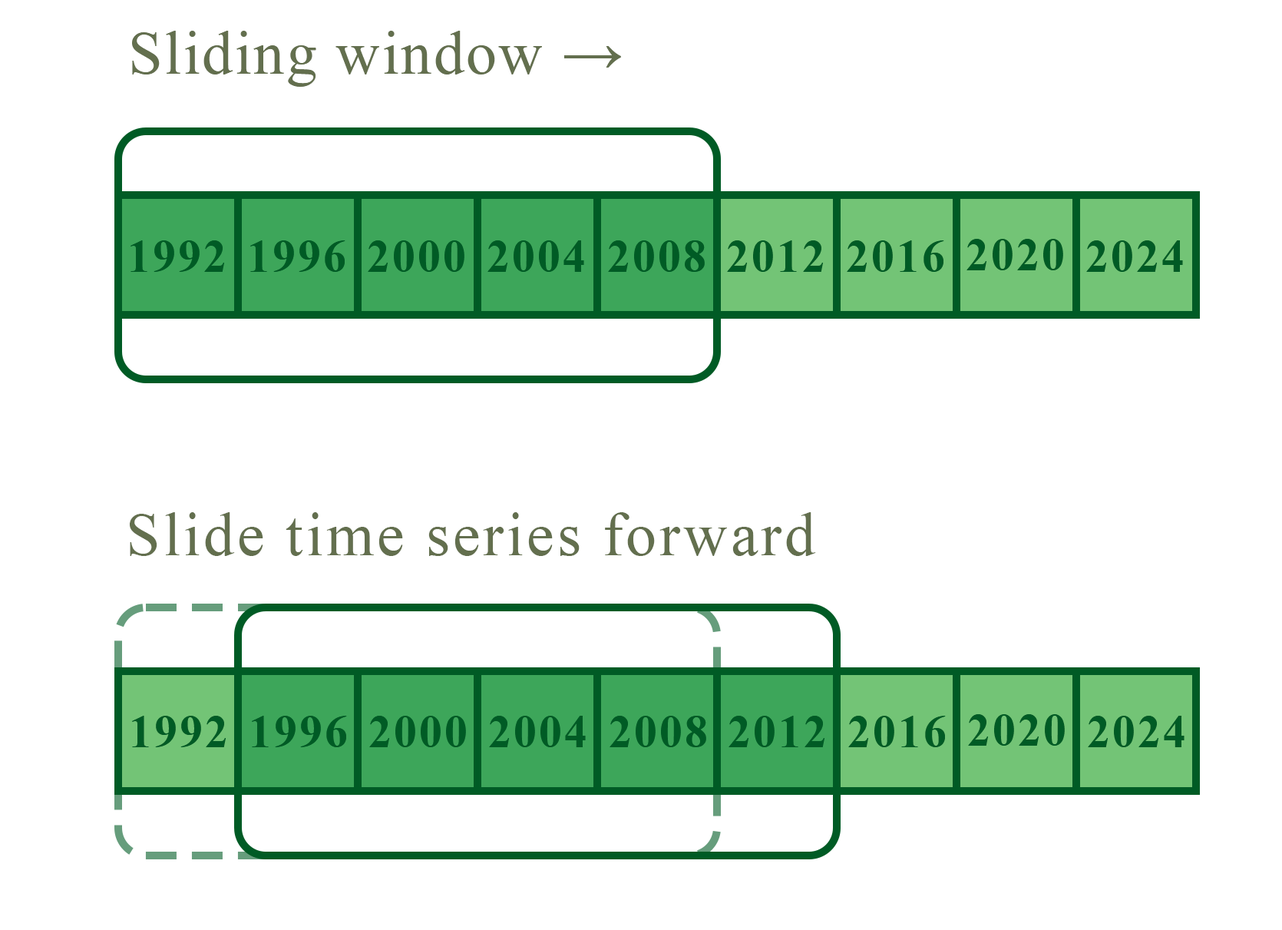
<style>
.page{position:relative;width:1282px;height:930px;background:#ffffff}
.page>*{position:absolute;margin:0}
.t1{font:61.4px "TimesNewRomanPSMT";letter-spacing:0.03em;color:#636f4e}
.t2{font:46.1px "TimesNewRomanPS-BoldMT";letter-spacing:0.05em;color:#005b25}
.t3{font:61.4px "TimesNewRomanPSMT";letter-spacing:0.05em;color:#636f4e}
</style>
<div class="page">
<p class="t1" style="left:132px;top:31px;width:489px;height:56px">Sliding window →</p>
<p class="t2" style="left:131px;top:240px;width:93px;height:32px">1992</p>
<p class="t2" style="left:131px;top:240px;width:93px;height:32px">1992</p>
<p class="t2" style="left:250px;top:240px;width:96px;height:32px">1996</p>
<p class="t2" style="left:250px;top:240px;width:96px;height:32px">1996</p>
<p class="t2" style="left:368px;top:240px;width:97px;height:32px">2000</p>
<p class="t2" style="left:368px;top:240px;width:97px;height:32px">2000</p>
<p class="t2" style="left:488px;top:240px;width:96px;height:32px">2004</p>
<p class="t2" style="left:488px;top:240px;width:96px;height:32px">2004</p>
<p class="t2" style="left:608px;top:240px;width:97px;height:32px">2008</p>
<p class="t2" style="left:608px;top:240px;width:97px;height:32px">2008</p>
<p class="t2" style="left:727px;top:240px;width:96px;height:32px">2012</p>
<p class="t2" style="left:727px;top:240px;width:96px;height:32px">2012</p>
<p class="t2" style="left:847px;top:240px;width:97px;height:32px">2016</p>
<p class="t2" style="left:847px;top:240px;width:97px;height:32px">2016</p>
<p class="t2" style="left:967px;top:239px;width:96px;height:31px">2020</p>
<p class="t2" style="left:967px;top:239px;width:96px;height:31px">2020</p>
<p class="t2" style="left:1087px;top:240px;width:96px;height:32px">2024</p>
<p class="t2" style="left:1087px;top:240px;width:96px;height:32px">2024</p>
<p class="t3" style="left:130px;top:512px;width:686px;height:44px">Slide time series forward</p>
<p class="t2" style="left:132px;top:716px;width:94px;height:31px">1992</p>
<p class="t2" style="left:252px;top:716px;width:95px;height:31px">1996</p>
<p class="t2" style="left:369px;top:716px;width:97px;height:31px">2000</p>
<p class="t2" style="left:489px;top:716px;width:97px;height:31px">2004</p>
<p class="t2" style="left:610px;top:716px;width:96px;height:31px">2008</p>
<p class="t2" style="left:729px;top:716px;width:96px;height:31px">2012</p>
<p class="t2" style="left:848px;top:716px;width:98px;height:31px">2016</p>
<p class="t2" style="left:968px;top:714px;width:97px;height:32px">2020</p>
<p class="t2" style="left:1088px;top:716px;width:97px;height:31px">2024</p>
</div>
